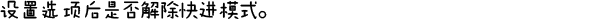
<style>
.page{position:relative;width:606px;height:20px;background:#ffffff}
.page>*{position:absolute;margin:0}
.t1{font:22px "¢è?";color:#000000}
</style>
<div class="page">
<p class="t1" style="left:0px;top:0px;width:267px;height:19px">设置选项后是否解除快进模式。</p>
</div>
